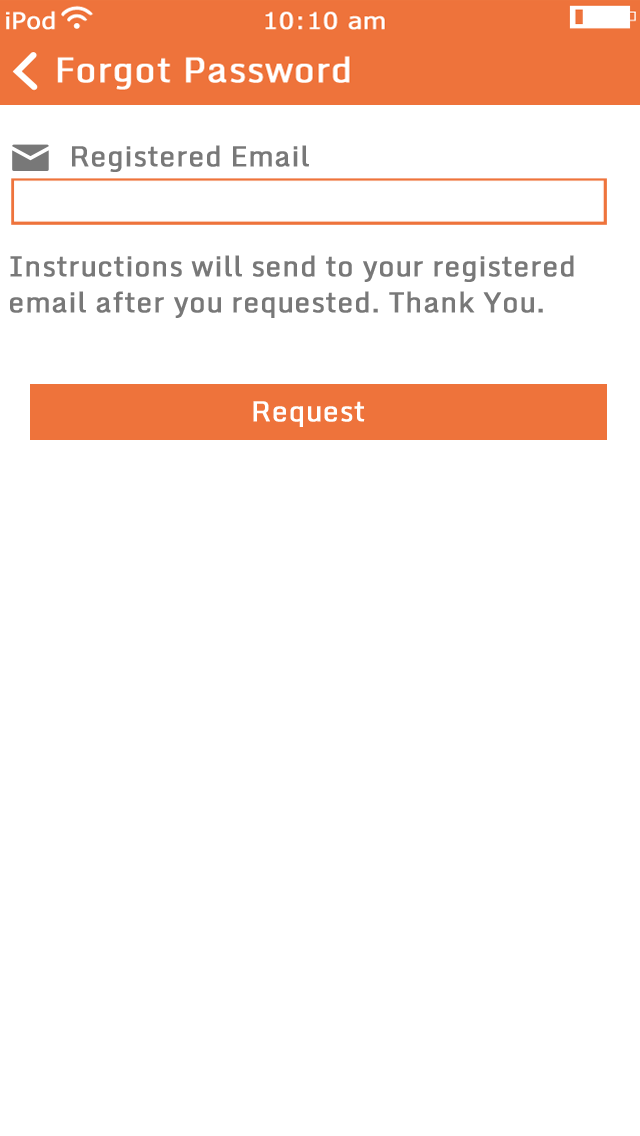
<style>
.page{position:relative;width:640px;height:1136px;background:#ffffff}
.page>*{position:absolute;margin:0}
.t1{font:28px "Monda-Regular";color:#787878;font-weight:bold}
.t2{font:28px/9px "Monda-Regular";color:#787878;font-weight:bold}
.t3{font:28px "Monda-Regular";color:#ffffff;font-weight:bold}
</style>
<div class="page">
<p class="t1" style="left:72px;top:145px;width:237px;height:27px">Registered Email</p>
<p class="t2" style="left:10px;top:255px;width:564px;height:63px">Instructions will send to your registered <br><br><br><br>email after you requested. Thank You.</p>
<p class="t3" style="left:253px;top:401px;width:112px;height:26px">Request</p>
</div>
